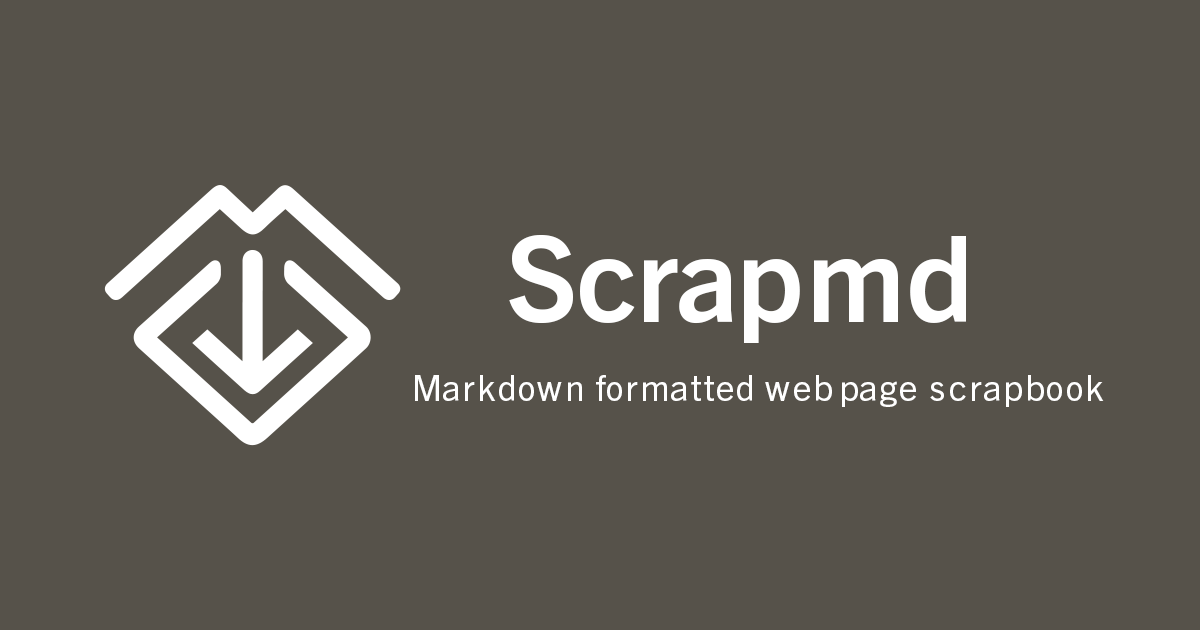
<style>
.page{position:relative;width:1200px;height:630px;background:#56524a}
.page>*{position:absolute;margin:0}
.t1{font:119.9px "TradeGothicNextLTPro-Bd";color:#ffffff}
.t2{font:36px "TradeGothicNextLTPro-Rg";color:#ffffff}
</style>
<div class="page">
<p class="t1" style="left:509px;top:235px;width:457px;height:108px">Scrapmd</p>
<p class="t2" style="left:415px;top:375px;width:689px;height:32px">Markdown formatted web page scrapbook</p>
</div>
